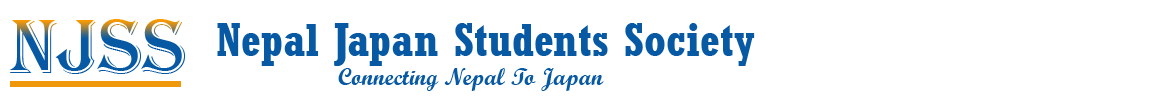
<style>
.page{position:relative;width:1170px;height:100px;background:#ffffff}
.page>*{position:absolute;margin:0}
.t1{font:79px "Algerian";color:#0859a4}
.t2{font:46px "Rockwell-CondensedBold";color:#0859a4}
.t3{font:24px "ScriptMTBold";color:#0859a4}
</style>
<div class="page">
<p class="t1" style="left:9px;top:19px;width:176px;height:55px">NJSS</p>
<p class="t2" style="left:217px;top:23px;width:538px;height:43px">Nepal Japan Students Society</p>
<p class="t3" style="left:338px;top:68px;width:266px;height:23px">Connecting Nepal To Japan</p>
</div>
